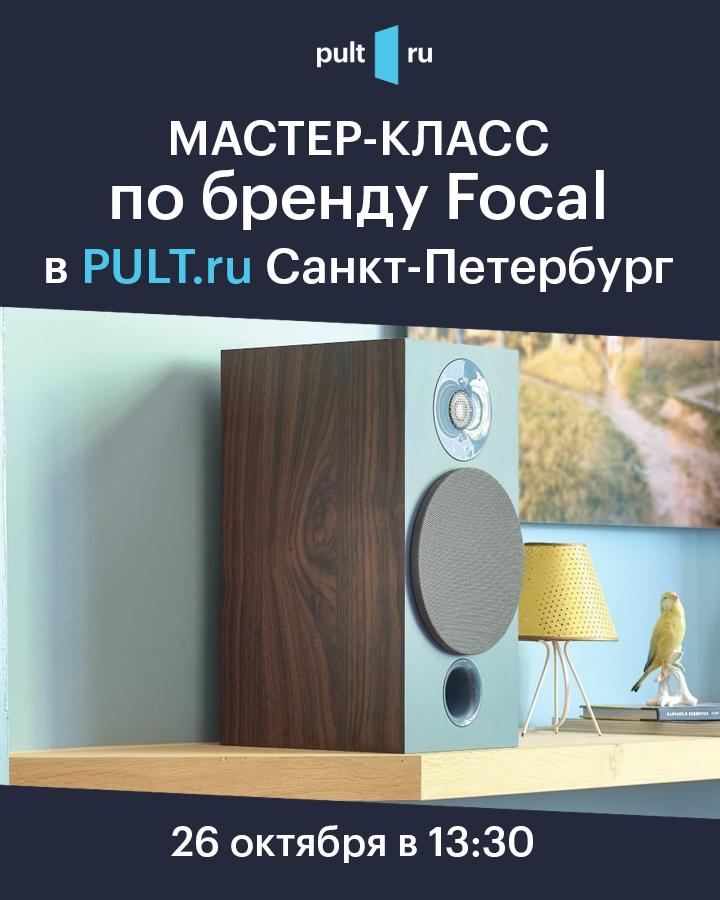
<style>
.page{position:relative;width:720px;height:900px;background:#24293c}
.page>*{position:absolute;margin:0}
.t1{font:64px/64px "GraphikLCG-Medium";color:#ffffff}
.t2{font:48px/64px "GraphikLCG-Medium";color:#ffffff}
.t3{font:48px/64px "GraphikLCG-Medium";color:#4cc7e9}
.t4{font:40px "GraphikLCG-Medium";color:#ffffff}
</style>
<div class="page">
<p class="t1" style="left:46px;top:120px;width:627px;height:172px;text-align:center"><span class="t2">МАСТЕР-КЛАСС<br></span>по бренду Focal<br><span class="t2">в </span><span class="t3">PULT.ru</span><span class="t2"> Cанкт-Петербург</span></p>
<p class="t4" style="left:171px;top:825px;width:362px;height:38px">26 октября в 13:30</p>
</div>
